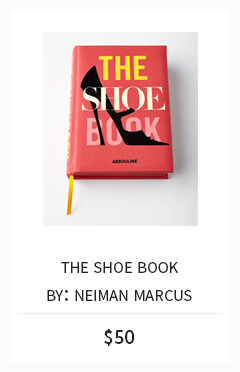
<style>
.page{position:relative;width:240px;height:372px;background:#ffffff}
.page>*{position:absolute;margin:0}
.t1{font:23.6px "SourceSansPro-Regular";color:#232323;font-variant:small-caps}
.t2{font:20.6px "SourceSansPro-Semibold";color:#232323}
</style>
<div class="page">
<p class="t1" style="left:61px;top:262px;width:118px;height:11px">the shoe book</p>
<p class="t1" style="left:47px;top:289px;width:145px;height:12px">by: neiman marcus</p>
<p class="t2" style="left:104px;top:329px;width:31px;height:17px">$50</p>
</div>
